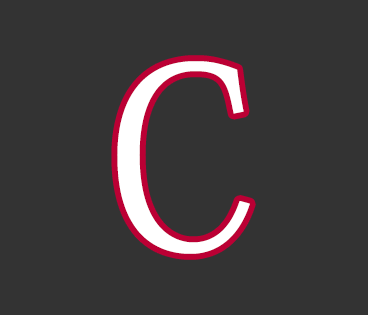
<style>
.page{position:relative;width:368px;height:315px;background:#333333}
.page>*{position:absolute;margin:0}
.t1{font:250px "AdobeKaitiStd-Regular";color:#ffffff}
</style>
<div class="page">
<p class="t1" style="left:117px;top:61px;width:133px;height:193px">C</p>
</div>
